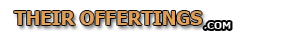
<style>
.page{position:relative;width:300px;height:40px;background:#ffffff}
.page>*{position:absolute;margin:0}
.t1{font:18.8px "Tahoma-Bold";color:#dda05d}
.t2{font:10.4px "Tahoma-Bold";color:#ffffff}
</style>
<div class="page">
<p class="t1" style="left:14px;top:11px;width:188px;height:14px">THEIR OFFERTINGS</p>
<p class="t2" style="left:204px;top:22px;width:27px;height:7px">.COM</p>
</div>
